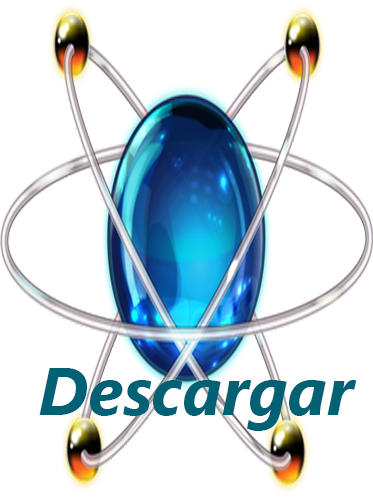
<style>
.page{position:relative;width:373px;height:498px;background:#ffffff}
.page>*{position:absolute;margin:0}
.t1{font:66.8px "SegoeUI-BoldItalic";color:#006175}
</style>
<div class="page">
<p class="t1" style="left:39px;top:368px;width:318px;height:63px">Descargar</p>
</div>
